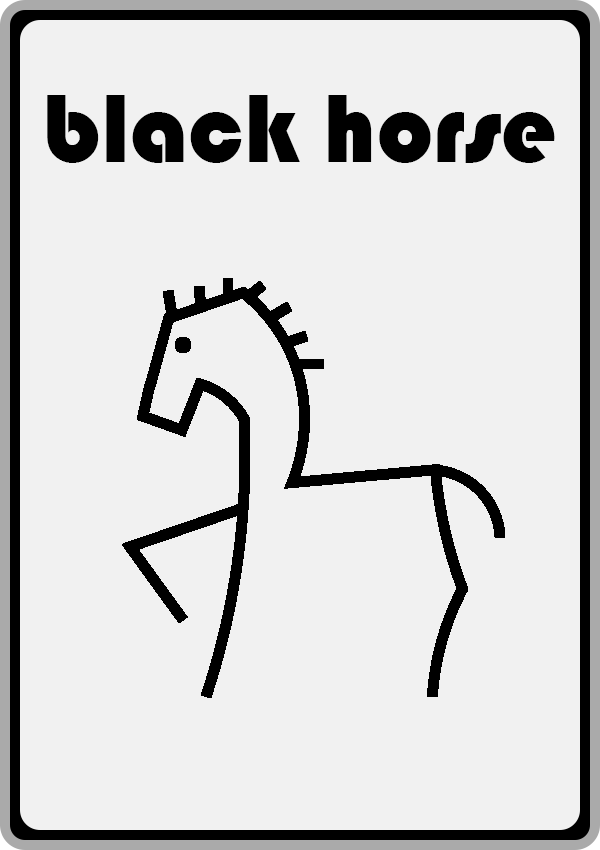
<style>
.page{position:relative;width:600px;height:850px;background:#f1f1f1}
.page>*{position:absolute;margin:0}
.t1{font:100px "Bauhaus93";color:#000000}
</style>
<div class="page">
<p class="t1" style="left:47px;top:95px;width:508px;height:68px">black horse</p>
</div>
